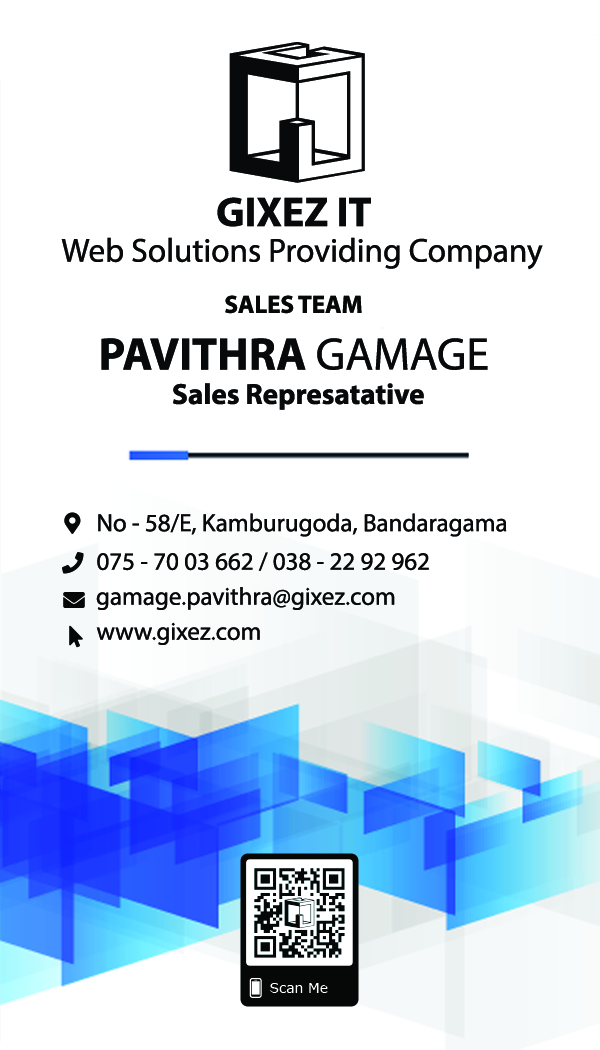
<style>
.page{position:relative;width:600px;height:1050px;background:#ffffff}
.page>*{position:absolute;margin:0}
.t1{font:150px "D3-Cubism";color:#08090a}
.t2{font:41.7px "MyriadPro-Bold";color:#08090a}
.t3{font:33.3px "MyriadPro-Regular";color:#08090a}
.t4{font:25px "MyriadPro-Bold";color:#060808}
.t5{font:45.8px "MyriadPro-Bold";color:#08090a}
.t6{font:45.8px "MyriadPro-Regular";color:#08090a}
.t7{font:29.2px "MyriadPro-Bold";color:#08090a}
.t8{font:25px "MyriadPro-Regular";color:#08090a}
</style>
<div class="page">
<p class="t1" style="left:229px;top:42px;width:136px;height:141px">G</p>
<p class="t2" style="left:217px;top:197px;width:154px;height:30px">GIXEZ IT</p>
<p class="t3" style="left:61px;top:237px;width:482px;height:33px">Web Solutions Providing Company</p>
<p class="t4" style="left:225px;top:295px;width:137px;height:19px">SALES TEAM</p>
<p class="t5" style="left:101px;top:338px;width:387px;height:32px">PAVITHRA <span class="t6">GAMAGE</span></p>
<p class="t7" style="left:173px;top:383px;width:251px;height:27px">Sales Represatative</p>
<p class="t8" style="left:98px;top:513px;width:409px;height:24px">No - 58/E, Kamburugoda, Bandaragama</p>
<p class="t8" style="left:97px;top:552px;width:332px;height:19px">075 - 70 03 662 / 038 - 22 92 962</p>
<p class="t8" style="left:96px;top:587px;width:299px;height:23px">gamage.pavithra@gixez.com</p>
<p class="t8" style="left:96px;top:622px;width:164px;height:23px">www.gixez.com</p>
</div>
